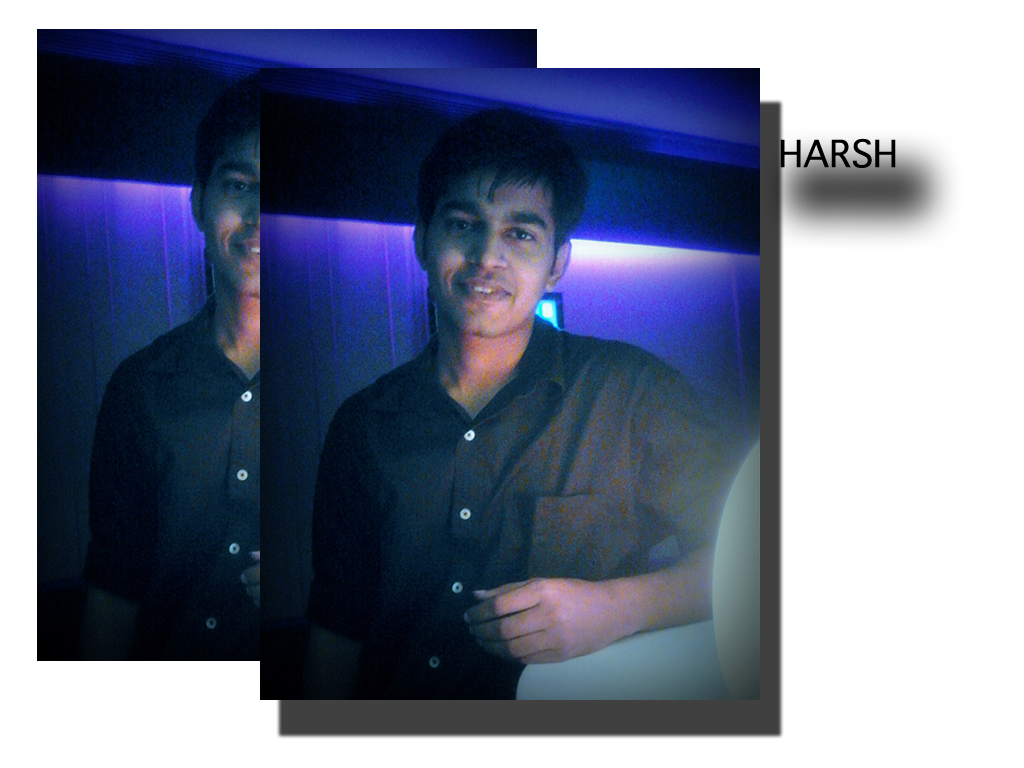
<style>
.page{position:relative;width:1024px;height:768px;background:#ffffff}
.page>*{position:absolute;margin:0}
.t1{font:36px "GenevaCY";color:#000000}
</style>
<div class="page">
<p class="t1" style="left:780px;top:138px;width:116px;height:30px">HARSH</p>
</div>
